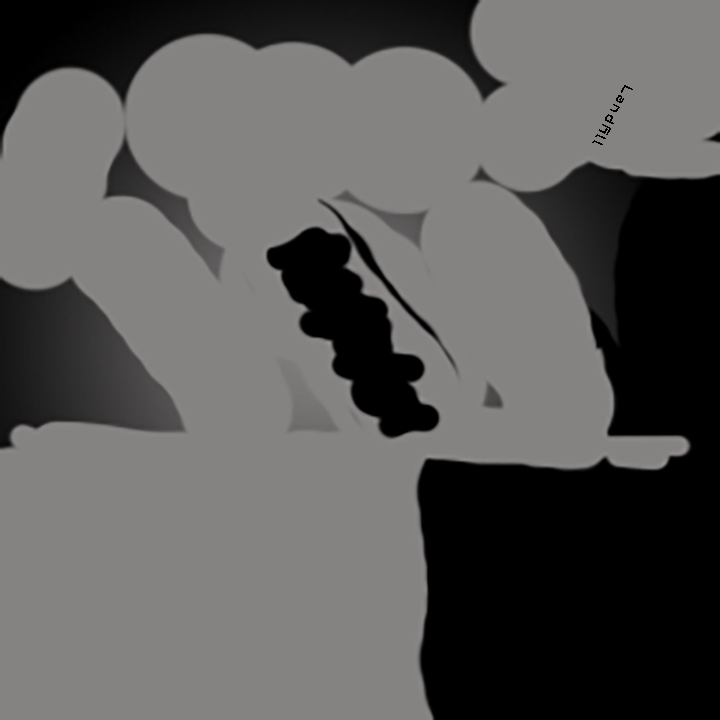
<style>
.page{position:relative;width:720px;height:720px;background:#858282}
.page>*{position:absolute;margin:0}
.t1{font:12.9px "Audiowide-Regular";letter-spacing:0.205em;color:#000000;scale:0.96 1}
</style>
<div class="page">
<p class="t1" style="left:592px;top:85px;width:41px;height:60px;rotate:120deg">Landfill</p>
</div>
